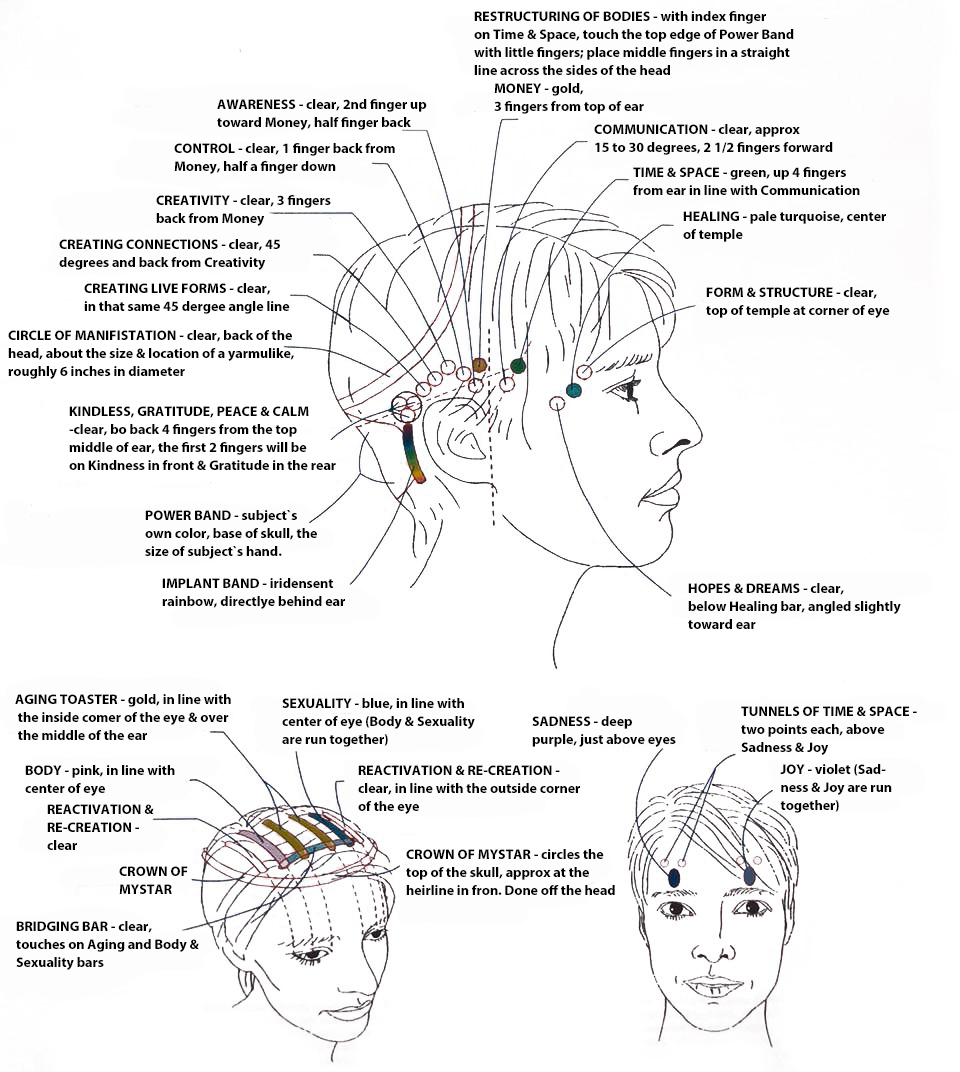
<style>
.page{position:relative;width:960px;height:1072px;background:#ffffff}
.page>*{position:absolute;margin:0}
.t1{font:14px/18px "MyriadPro-Bold";color:#000000}
</style>
<div class="page">
<p class="t1" style="left:474px;top:11px;width:320px;height:64px">RESTRUCTURING OF BODIES - with index finger<br>on Time &amp; Space, touch the top edge of Power Band<br>with little fingers; place middle fingers in a straight<br>line across the sides of the head</p>
<p class="t1" style="left:494px;top:83px;width:150px;height:31px">MONEY - gold, <br>3 fingers from top of ear</p>
<p class="t1" style="left:217px;top:99px;width:210px;height:31px">AWARENESS - clear, 2nd finger up<br>toward Money, half finger back</p>
<p class="t1" style="left:594px;top:124px;width:239px;height:31px">COMMUNICATION - clear, approx<br>15 to 30 degrees, 2 1/2 fingers forward</p>
<p class="t1" style="left:174px;top:143px;width:221px;height:31px">CONTROL - clear, 1 finger back from<br>Money, half a finger down</p>
<p class="t1" style="left:633px;top:167px;width:227px;height:28px">TIME &amp; SPACE - green, up 4 fingers <br>from ear in line with Communication</p>
<p class="t1" style="left:156px;top:195px;width:175px;height:31px">CREATIVITY - clear, 3 fingers<br>back from Money</p>
<p class="t1" style="left:683px;top:211px;width:203px;height:31px">HEALING - pale turquoise, center<br>of temple</p>
<p class="t1" style="left:59px;top:239px;width:221px;height:31px">CREATING CONNECTIONS - clear, 45<br>degrees and back from Creativity</p>
<p class="t1" style="left:84px;top:283px;width:206px;height:31px">CREATING LIVE FORMS - clear, <br>in that same 45 dergee angle line</p>
<p class="t1" style="left:706px;top:287px;width:184px;height:31px">FORM &amp; STRUCTURE - clear,<br>top of temple at corner of eye</p>
<p class="t1" style="left:8px;top:330px;width:286px;height:49px">CIRCLE OF MANIFISTATION - clear, back of the <br>head, about the size &amp; location of a yarmulike,<br>roughly 6 inches in diameter</p>
<p class="t1" style="left:69px;top:406px;width:267px;height:64px">KINDLESS, GRATITUDE, PEACE &amp; CALM<br>-clear, bo back 4 fingers from the top<br>middle of ear, the first 2 fingers will be<br>on Kindness in front &amp; Gratitude in the rear</p>
<p class="t1" style="left:145px;top:510px;width:172px;height:49px">POWER BAND - subject`s<br>own color, base of skull, the<br>size of subject`s hand.</p>
<p class="t1" style="left:162px;top:578px;width:183px;height:31px">IMPLANT BAND - iridensent<br>rainbow, directlye behind ear</p>
<p class="t1" style="left:688px;top:583px;width:213px;height:46px">HOPES &amp; DREAMS - clear,<br>below Healing bar, angled slightly<br>toward ear</p>
<p class="t1" style="left:15px;top:694px;width:216px;height:46px">AGING TOASTER - gold, in line with<br> the inside comer of the eye &amp; over<br> the middle of the ear</p>
<p class="t1" style="left:282px;top:698px;width:193px;height:49px">SEXUALITY - blue, in line with<br>center of eye (Body &amp; Sexuality<br>are run together)</p>
<p class="t1" style="left:741px;top:706px;width:176px;height:49px">TUNNELS OF TIME &amp; SPACE -<br>two points each, above <br>Sadness &amp; Joy</p>
<p class="t1" style="left:532px;top:716px;width:144px;height:31px">SADNESS - deep <br>purple, just above eyes</p>
<p class="t1" style="left:25px;top:765px;width:150px;height:31px">BODY - pink, in line with<br>center of eye</p>
<p class="t1" style="left:358px;top:765px;width:222px;height:49px">REACTIVATION &amp; RE-CREATION - <br>clear, in line with the outside corner<br>of the eye</p>
<p class="t1" style="left:780px;top:764px;width:112px;height:49px">JOY - violet (Sad-<br>ness &amp; Joy are run<br>together)</p>
<p class="t1" style="left:47px;top:804px;width:107px;height:46px">REACTIVATION &amp;<br>RE-CREATION - <br>clear</p>
<p class="t1" style="left:406px;top:849px;width:209px;height:46px">CROWN OF MYSTAR - circles the<br>top of the skull, approx at the<br>heirline in fron. Done off the head</p>
<p class="t1" style="left:119px;top:866px;width:69px;height:28px">CROWN OF <br>MYSTAR</p>
<p class="t1" style="left:16px;top:921px;width:183px;height:49px">BRIDGING BAR - clear,<br>touches on Aging and Body &amp;<br>Sexuality bars</p>
</div>
